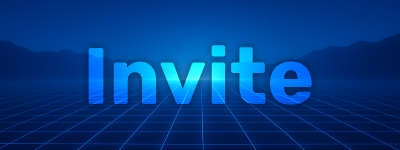
<style>
.page{position:relative;width:400px;height:150px}
.page>*{position:absolute;margin:0}
.t1{font:80px "Rubik-Bold"}
</style>
<div class="page">
<p class="t1" style="left:88px;top:45px;width:224px;height:60px">Invite</p>
</div>
